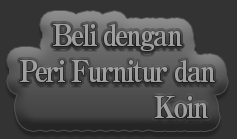
<style>
.page{position:relative;width:237px;height:139px;background:#333333}
.page>*{position:absolute;margin:0}
.t1{font:30px/38px "RyuminPro-ExBold";letter-spacing:-0.08em;color:#9f9f9f;scale:0.9 1}
</style>
<div class="page">
<p class="t1" style="left:20px;top:24px;width:195px;height:94px;text-align:center">Beli dengan<br>Peri Furnitur dan<br>                   Koin</p>
</div>
